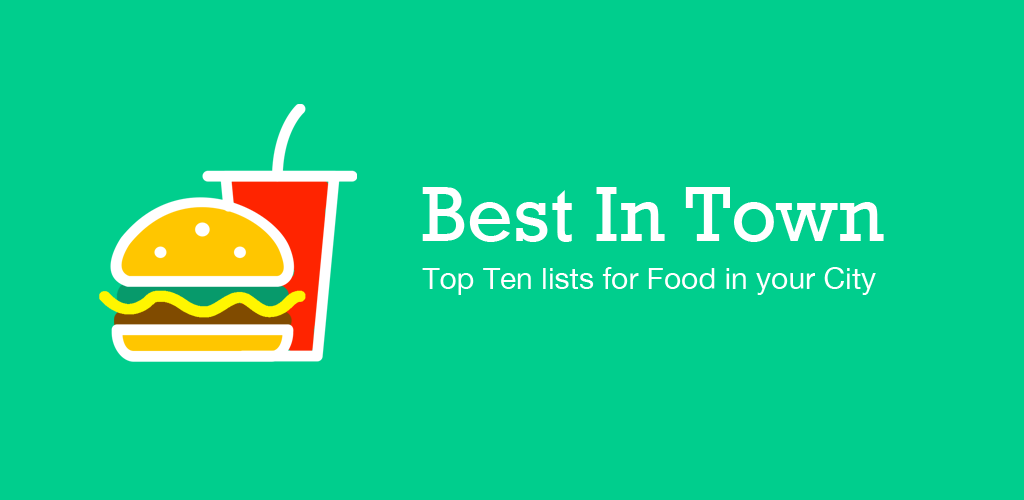
<style>
.page{position:relative;width:1024px;height:500px;background:#00ce8d}
.page>*{position:absolute;margin:0}
.t1{font:80px "Rockwell";color:#ffffff}
.t2{font:30px "HelveticaNeue";color:#ffffff}
</style>
<div class="page">
<p class="t1" style="left:422px;top:187px;width:462px;height:55px">Best In Town</p>
<p class="t2" style="left:422px;top:267px;width:454px;height:28px">Top Ten lists for Food in your City</p>
</div>
